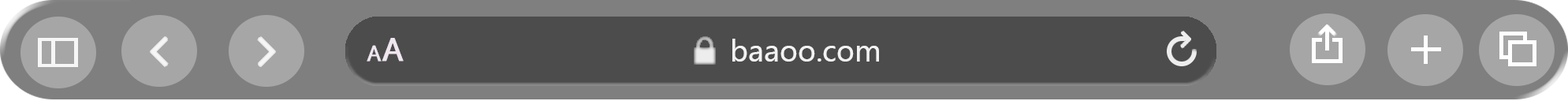
<style>
.page{position:relative;width:1568px;height:101px;background:#7f7f7f}
.page>*{position:absolute;margin:0}
.t1{font:23px "SimHei";color:#fbf1fb;scale:1.32 1}
.t2{font:34.2px "SimHei";color:#fbf1fb;scale:1.32 1}
.t3{font:28.4px "MicrosoftYaHei";color:#ffffff}
</style>
<div class="page">
<p class="t1" style="left:367px;top:38px;width:37px;height:23px;opacity:0.9">A<span class="t2">A</span></p>
<p class="t3" style="left:732px;top:39px;width:147px;height:22px;opacity:0.9">baaoo.com</p>
</div>
